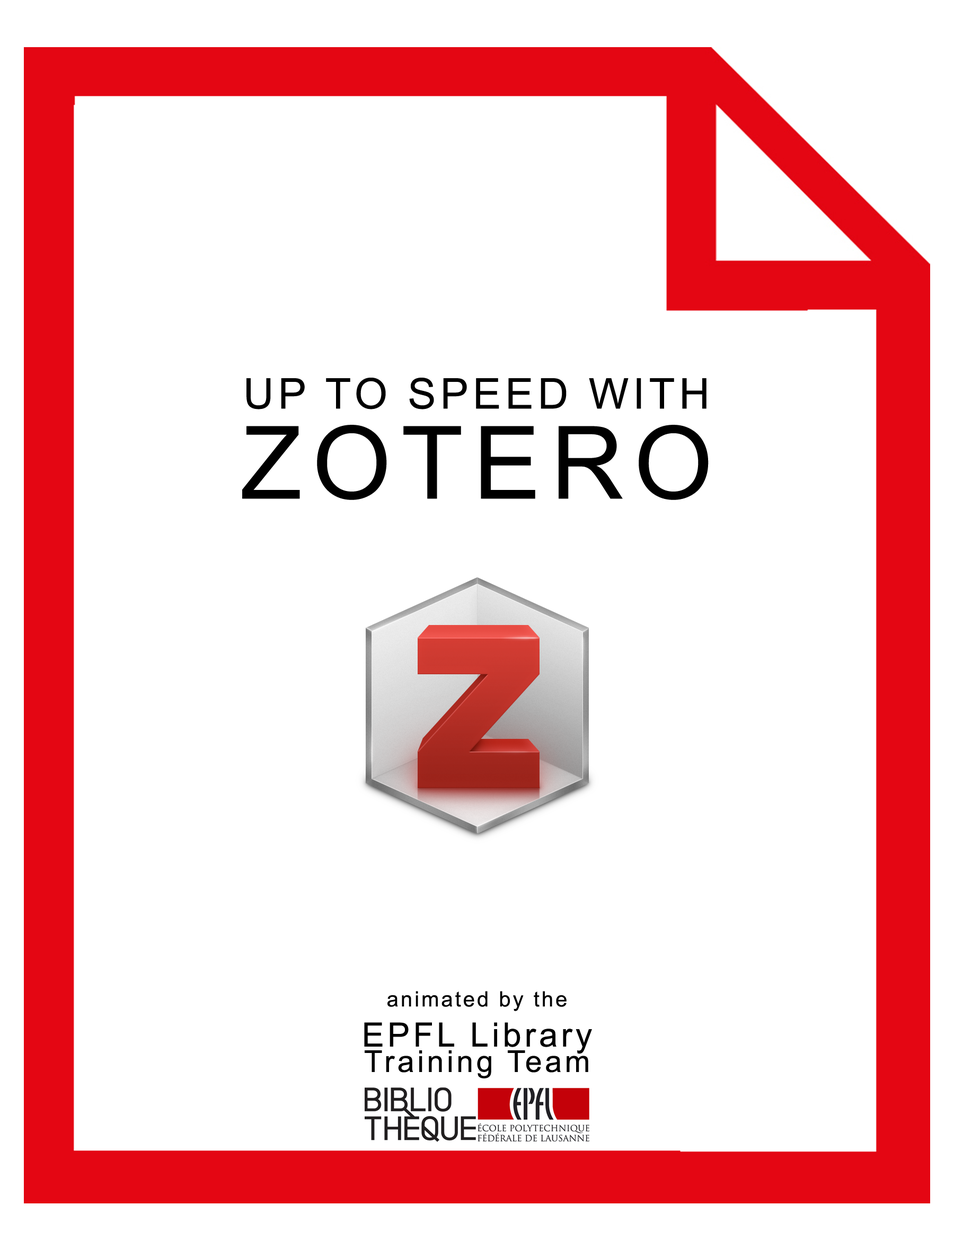
<style>
.page{position:relative;width:954px;height:1250px;background:#ffffff}
.page>*{position:absolute;margin:0}
.t1{font:42.4px/63.6px "ArialMT";letter-spacing:0.1em;color:#000000}
.t2{font:101.2px/90.1px "ArialMT";letter-spacing:0.1em;color:#000000}
.t3{font:21.2px "ArialMT";letter-spacing:0.1em;color:#000000}
.t4{font:33.4px "ArialMT";letter-spacing:0.1em;color:#000000}
.t5{font:30.2px/25.4px "ArialMT";letter-spacing:0.1em;color:#000000}
</style>
<div class="page">
<p class="t1" style="left:242px;top:378px;width:466px;height:122px;text-align:center">UP TO SPEED WITH<br><span class="t2">ZOTERO</span></p>
<p class="t3" style="left:364px;top:991px;width:228px;height:88px;text-align:center">animated by the<br><span class="t4">EPFL Library<br></span><span class="t5">Training Team</span></p>
</div>
